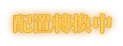
<style>
.page{position:relative;width:123px;height:46px;background:#ffffff}
.page>*{position:absolute;margin:0}
.t1{font:20px "RyuminPr6N-ExBold";color:#fcce5b}
</style>
<div class="page">
<p class="t1" style="left:13px;top:14px;width:99px;height:19px">配置轉換中</p>
</div>
